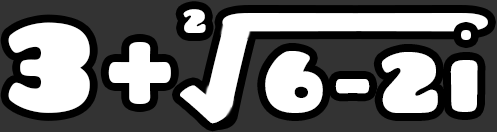
<style>
.page{position:relative;width:497px;height:132px;background:#333333}
.page>*{position:absolute;margin:0}
.t1{font:36px "Pusab";letter-spacing:0.1em;color:#ffffff}
.t2{font:154.6px "Pusab";letter-spacing:0.1em;color:#ffffff;scale:0.87 1}
.t3{font:118px "Pusab";letter-spacing:0.1em;color:#ffffff;scale:4.9 1}
.t4{font:135.2px "Pusab";letter-spacing:0.1em;color:#ffffff}
.t5{font:54.2px "Pusab";letter-spacing:0.1em;color:#ffffff}
.t6{font:92.5px "Pusab";letter-spacing:0.1em;color:#ffffff}
.t7{font:65px "Pusab";letter-spacing:0.1em;color:#ffffff;scale:1.43 1}
</style>
<div class="page">
<p class="t1" style="left:183px;top:9px;width:23px;height:24px">2</p>
<p class="t2" style="left:203px;top:16px;width:48px;height:106px">/</p>
<p class="t3" style="left:222px;top:13px;width:266px;height:19px">_</p>
<p class="t4" style="left:8px;top:22px;width:163px;height:91px">3+</p>
<p class="t5" style="left:461px;top:30px;width:10px;height:10px">.</p>
<p class="t6" style="left:265px;top:51px;width:213px;height:62px">6-2i</p>
<p class="t7" style="left:180px;top:85px;width:47px;height:39px;rotate:152deg">/</p>
</div>
